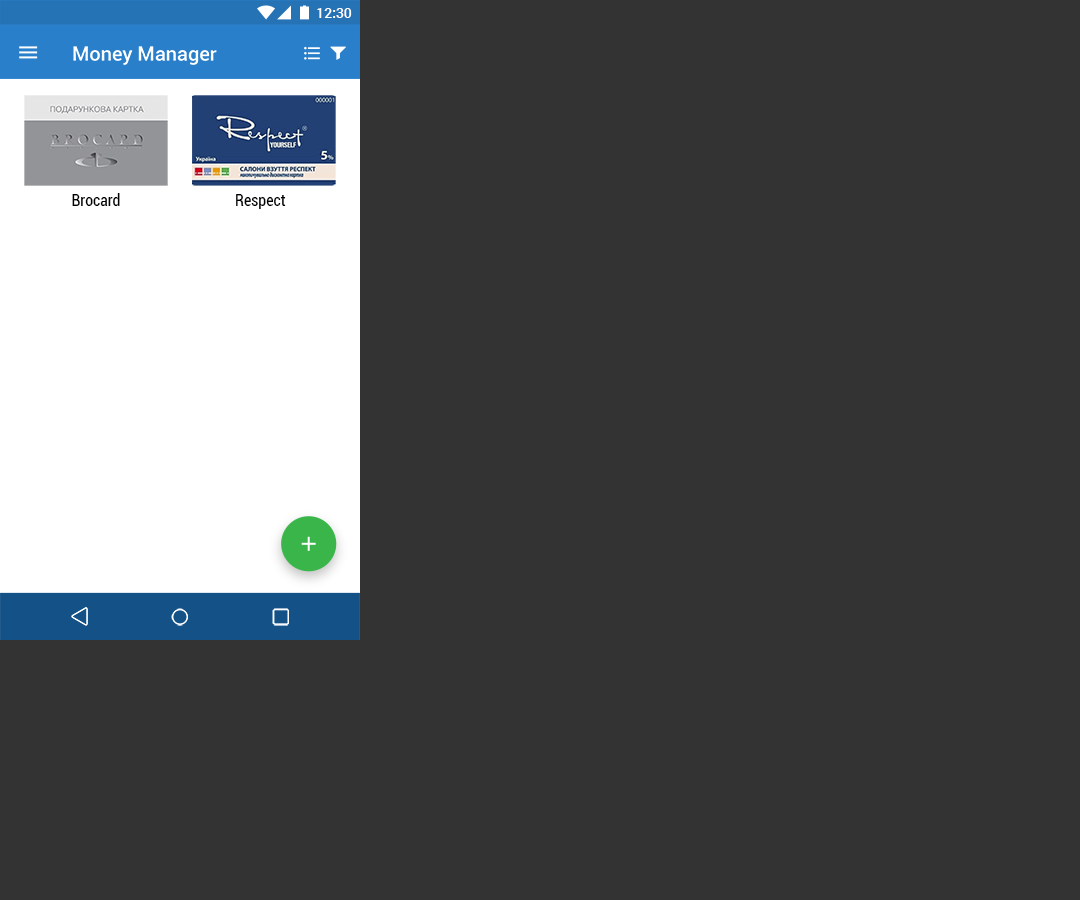
<style>
.page{position:relative;width:1080px;height:900px;background:#333333}
.page>*{position:absolute;margin:0}
.t1{font:14px "Roboto-Medium";color:#ffffff}
.t2{font:20px "Roboto-Medium";color:#ffffff}
.t3{font:16px "Roboto-Condensed";color:#000000}
</style>
<div class="page">
<p class="t1" style="left:317px;top:8px;width:35px;height:10px">12:30</p>
<p class="t2" style="left:73px;top:46px;width:144px;height:19px">Money Manager</p>
<p class="t3" style="left:72px;top:193px;width:48px;height:13px">Brocard</p>
<p class="t3" style="left:236px;top:194px;width:50px;height:15px">Respect</p>
</div>
